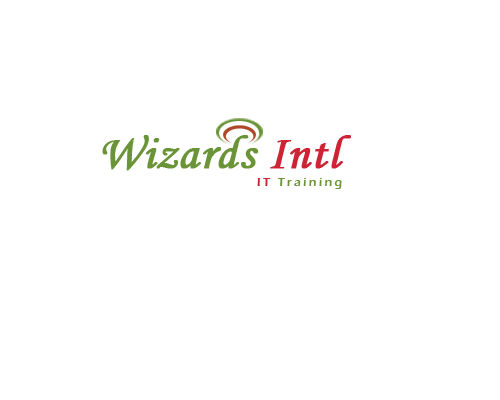
<style>
.page{position:relative;width:500px;height:400px;background:#ffffff}
.page>*{position:absolute;margin:0}
.t1{font:48px "MonotypeCorsiva";letter-spacing:0.005em;color:#6a9437;font-weight:bold}
.t2{font:48px "MonotypeCorsiva";letter-spacing:0.005em;color:#cc2435;font-weight:bold}
.t3{font:12px "ErasITC-Demi";letter-spacing:0.2em;color:#6a9437}
.t4{font:12px "ErasITC-Demi";letter-spacing:0.2em;color:#cc2435}
</style>
<div class="page">
<p class="t1" style="left:102px;top:135px;width:249px;height:36px">Wizards<span class="t2"> Intl</span></p>
<p class="t3" style="left:257px;top:178px;width:85px;height:11px"><span class="t4">IT </span>Training</p>
</div>
